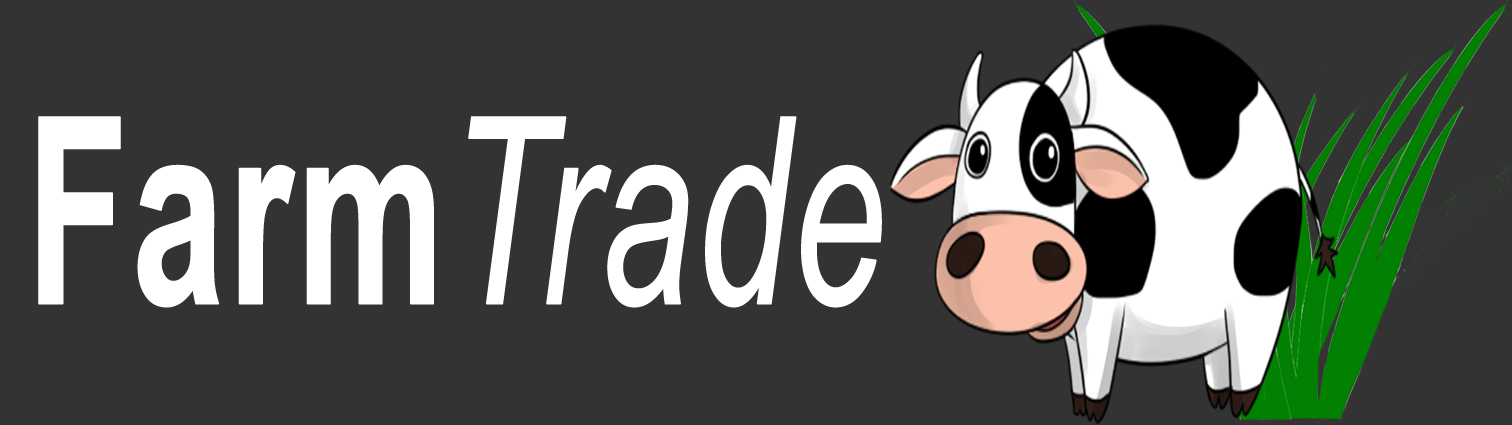
<style>
.page{position:relative;width:1512px;height:425px;background:#333333}
.page>*{position:absolute;margin:0}
.t1{font:260.9px "Arial-ItalicMT";color:#ffffff;font-weight:bold;scale:0.63 1}
.t2{font:260.9px "Arial-BoldMT";color:#ffffff;font-weight:bold;scale:0.63 1}
</style>
<div class="page">
<p class="t1" style="left:38px;top:116px;width:844px;height:192px"><span class="t2">Farm</span>Trade</p>
</div>
